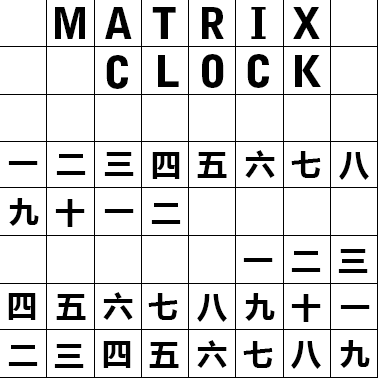
<style>
.page{position:relative;width:378px;height:378px;background:#ffffff}
.page>*{position:absolute;margin:0}
.t1{font:43px "BellGothicStd-Black";color:#000000}
.t2{font:30px "MicrosoftYaHei-Bold";color:#000000}
</style>
<div class="page">
<p class="t1" style="left:55px;top:7px;width:30px;height:32px">M</p>
<p class="t1" style="left:105px;top:7px;width:27px;height:32px">A</p>
<p class="t1" style="left:152px;top:7px;width:24px;height:32px">T</p>
<p class="t1" style="left:202px;top:7px;width:22px;height:32px">R</p>
<p class="t1" style="left:251px;top:7px;width:15px;height:32px">I</p>
<p class="t1" style="left:293px;top:7px;width:27px;height:32px">X</p>
<p class="t1" style="left:202px;top:54px;width:22px;height:34px">O</p>
<p class="t1" style="left:247px;top:54px;width:22px;height:34px">C</p>
<p class="t1" style="left:106px;top:55px;width:22px;height:34px">C</p>
<p class="t1" style="left:158px;top:55px;width:21px;height:32px">L</p>
<p class="t1" style="left:295px;top:55px;width:26px;height:32px">K</p>
<p class="t2" style="left:245px;top:150px;width:30px;height:28px">六</p>
<p class="t2" style="left:8px;top:161px;width:30px;height:4px">一</p>
<p class="t2" style="left:56px;top:154px;width:30px;height:21px">二</p>
<p class="t2" style="left:104px;top:152px;width:30px;height:24px">三</p>
<p class="t2" style="left:152px;top:152px;width:28px;height:27px">四</p>
<p class="t2" style="left:197px;top:152px;width:30px;height:26px">五</p>
<p class="t2" style="left:291px;top:151px;width:30px;height:27px">七</p>
<p class="t2" style="left:339px;top:152px;width:30px;height:28px">八</p>
<p class="t2" style="left:9px;top:198px;width:30px;height:28px">九</p>
<p class="t2" style="left:55px;top:199px;width:30px;height:28px">十</p>
<p class="t2" style="left:104px;top:209px;width:30px;height:4px">一</p>
<p class="t2" style="left:151px;top:203px;width:30px;height:21px">二</p>
<p class="t2" style="left:291px;top:251px;width:30px;height:21px">二</p>
<p class="t2" style="left:338px;top:249px;width:30px;height:24px">三</p>
<p class="t2" style="left:243px;top:258px;width:30px;height:4px">一</p>
<p class="t2" style="left:8px;top:293px;width:28px;height:27px">四</p>
<p class="t2" style="left:56px;top:294px;width:30px;height:26px">五</p>
<p class="t2" style="left:103px;top:292px;width:30px;height:28px">六</p>
<p class="t2" style="left:148px;top:293px;width:30px;height:27px">七</p>
<p class="t2" style="left:197px;top:294px;width:30px;height:28px">八</p>
<p class="t2" style="left:245px;top:293px;width:30px;height:28px">九</p>
<p class="t2" style="left:291px;top:294px;width:30px;height:28px">十</p>
<p class="t2" style="left:340px;top:305px;width:30px;height:4px">一</p>
<p class="t2" style="left:103px;top:341px;width:28px;height:27px">四</p>
<p class="t2" style="left:149px;top:342px;width:30px;height:26px">五</p>
<p class="t2" style="left:197px;top:340px;width:30px;height:28px">六</p>
<p class="t2" style="left:243px;top:341px;width:30px;height:27px">七</p>
<p class="t2" style="left:291px;top:341px;width:30px;height:28px">八</p>
<p class="t2" style="left:340px;top:340px;width:30px;height:28px">九</p>
<p class="t2" style="left:8px;top:345px;width:30px;height:21px">二</p>
<p class="t2" style="left:54px;top:344px;width:30px;height:24px">三</p>
</div>
